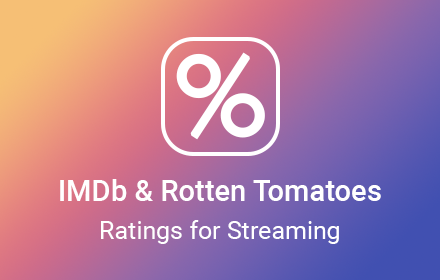
<style>
.page{position:relative;width:440px;height:280px}
.page>*{position:absolute;margin:0}
.t1{font:109.8px "Marcellus-Regular";color:#ffffff;font-weight:bold}
.t2{font:29.2px/41.7px "Roboto-Medium";color:#ffffff}
.t3{font:25px/37.5px "Roboto-Regular";color:#ffffff}
</style>
<div class="page">
<p class="t1" style="left:176px;top:52px;width:89px;height:88px">%</p>
<p class="t2" style="left:60px;top:179px;width:321px;height:65px;text-align:center">IMDb &amp; Rotten Tomatoes<br><span class="t3">Ratings for Streaming</span></p>
</div>
